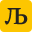
<style>
.page{position:relative;width:32px;height:32px;background:#fdc600}
.page>*{position:absolute;margin:0}
.t1{font:32px "PTSerif-Regular";color:#242320}
</style>
<div class="page">
<p class="t1" style="left:4px;top:8px;width:24px;height:17px">љ</p>
</div>
